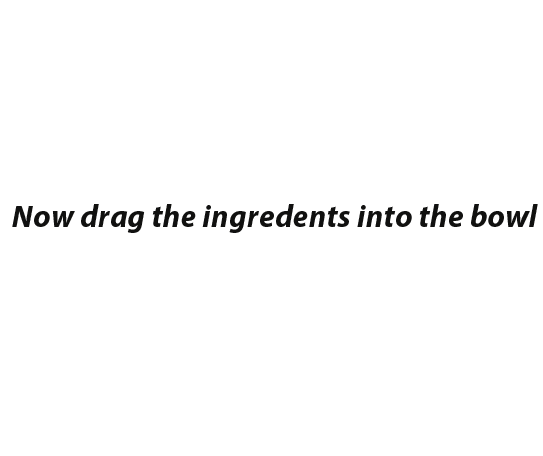
<style>
.page{position:relative;width:543px;height:456px;background:#ffffff}
.page>*{position:absolute;margin:0}
.t1{font:31.3px "MyriadPro-BoldIt";letter-spacing:0.01em;color:#111110}
</style>
<div class="page">
<p class="t1" style="left:12px;top:204px;width:526px;height:29px">Now drag the ingredents into the bowl</p>
</div>
